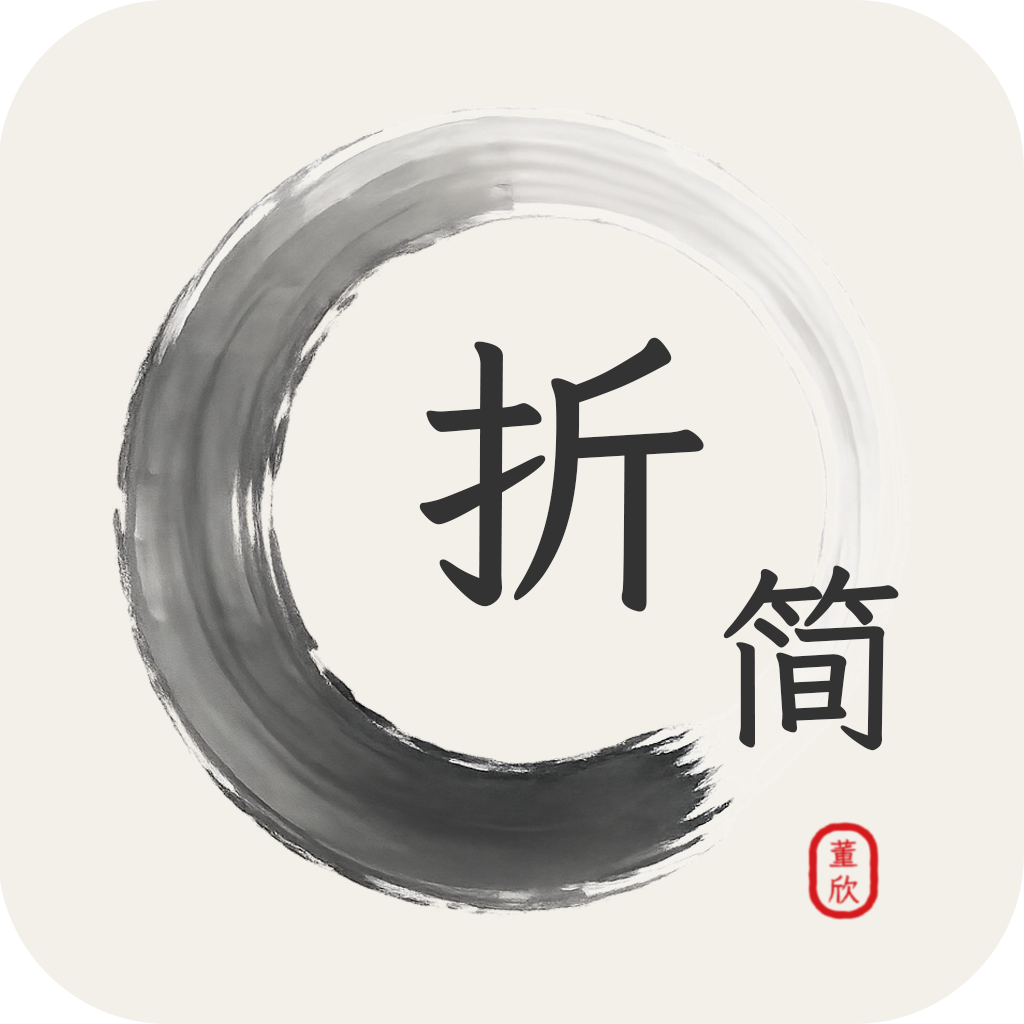
<style>
.page{position:relative;width:1024px;height:1024px;background:#f3f0ea}
.page>*{position:absolute;margin:0}
.t1{font:300px "LXGWWenKai-Bold";color:#333333}
.t2{font:200px "LXGWWenKai-Bold";color:#333333}
</style>
<div class="page">
<p class="t1" style="left:419px;top:337px;width:285px;height:275px">折</p>
<p class="t2" style="left:723px;top:565px;width:176px;height:186px">简</p>
</div>
